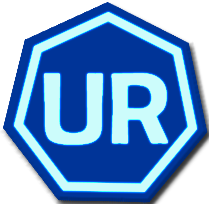
<style>
.page{position:relative;width:209px;height:204px;background:#003498}
.page>*{position:absolute;margin:0}
.t1{font:100px "BerlinSansFB-Reg";color:#ccfcfb;font-weight:bold}
</style>
<div class="page">
<p class="t1" style="left:44px;top:73px;width:124px;height:72px">UR</p>
</div>
